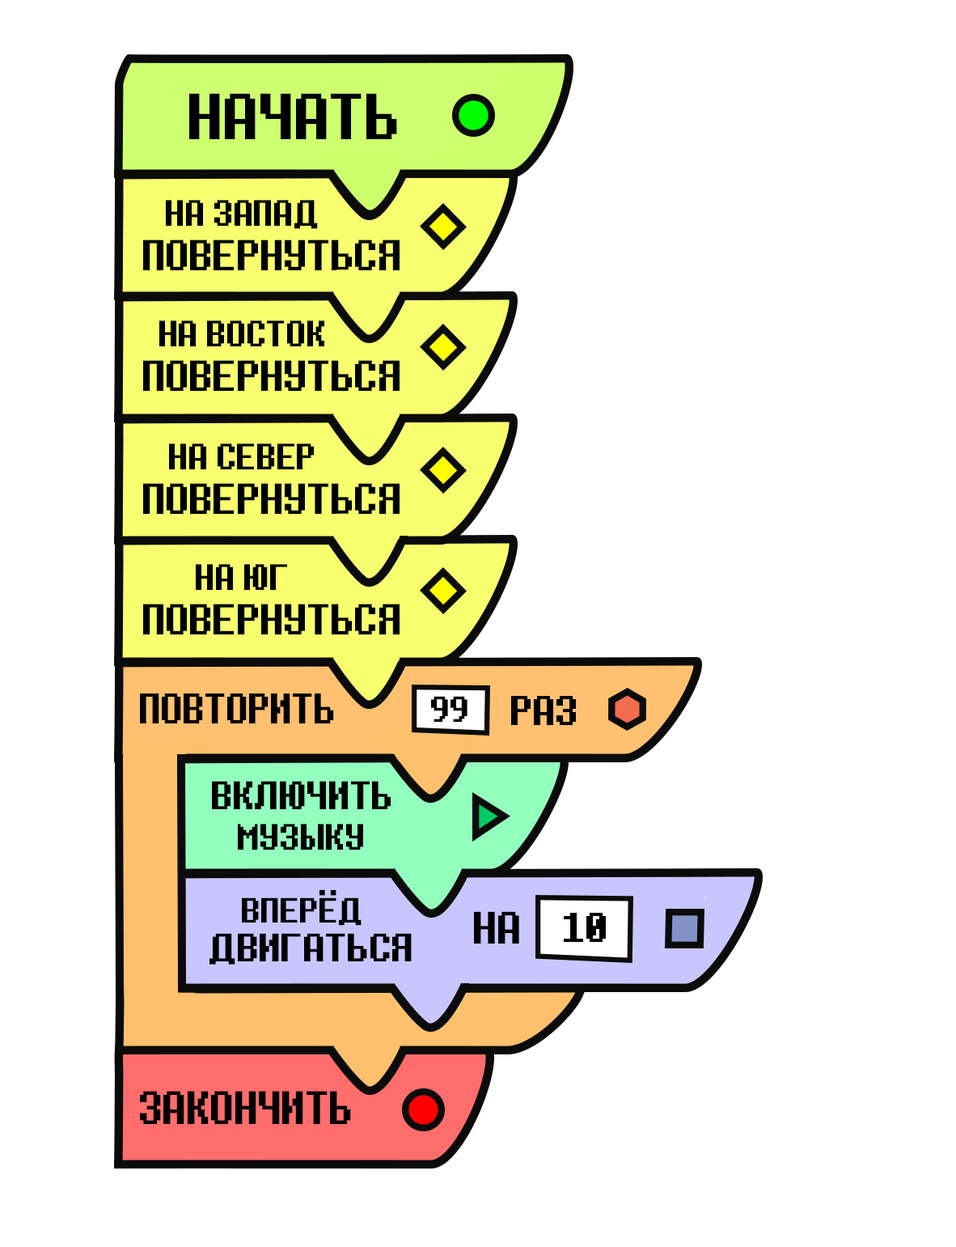
<style>
.page{position:relative;width:956px;height:1247px;background:#ffffff}
.page>*{position:absolute;margin:0}
.t1{font:60.7px "Determination";color:#000000}
.t2{font:34.1px "Determination";color:#000000}
.t3{font:40.4px "Determination";color:#000000}
.t4{font:39.9px "Determination";color:#000000;scale:0.94 1}
.t5{font:33.7px "Determination";color:#000000}
.t6{font:38.8px "Determination";color:#000000}
.t7{font:37.1px "Determination";color:#000000}
.t8{font:34.2px "Determination";color:#000000}
.t9{font:32.6px "Determination";color:#000000}
.t10{font:42.3px "Determination";color:#000000}
.t11{font:37px "Determination";color:#000000}
.t12{font:43.8px "Determination";color:#000000;scale:0.93 1}
</style>
<div class="page">
<p class="t1" style="left:189px;top:93px;width:208px;height:46px">НАЧАТЬ</p>
<p class="t2" style="left:166px;top:200px;width:152px;height:29px">НА ЗАПАД</p>
<p class="t3" style="left:143px;top:239px;width:257px;height:31px">ПОВЕРНУТЬСЯ</p>
<p class="t2" style="left:159px;top:320px;width:165px;height:26px">НА ВОСТОК</p>
<p class="t3" style="left:143px;top:360px;width:257px;height:31px">ПОВЕРНУТЬСЯ</p>
<p class="t2" style="left:169px;top:443px;width:145px;height:26px">НА СЕВЕР</p>
<p class="t3" style="left:143px;top:483px;width:257px;height:31px">ПОВЕРНУТЬСЯ</p>
<p class="t2" style="left:196px;top:564px;width:91px;height:26px">НА ЮГ</p>
<p class="t3" style="left:143px;top:604px;width:257px;height:30px">ПОВЕРНУТЬСЯ</p>
<p class="t4" style="left:140px;top:693px;width:194px;height:30px">ПОВТОРИТЬ</p>
<p class="t5" style="left:431px;top:696px;width:37px;height:26px">99</p>
<p class="t6" style="left:511px;top:696px;width:65px;height:29px">РАЗ</p>
<p class="t7" style="left:212px;top:781px;width:179px;height:28px">ВКЛЮЧИТЬ</p>
<p class="t8" style="left:238px;top:824px;width:125px;height:26px">МУЗЫКУ</p>
<p class="t9" style="left:242px;top:889px;width:120px;height:37px">ВПЕРЁД</p>
<p class="t10" style="left:474px;top:911px;width:45px;height:32px">НА</p>
<p class="t6" style="left:564px;top:913px;width:42px;height:29px">10</p>
<p class="t11" style="left:210px;top:933px;width:202px;height:31px">ДВИГАТЬСЯ</p>
<p class="t12" style="left:140px;top:1091px;width:211px;height:33px">ЗАКОНЧИТЬ</p>
</div>
